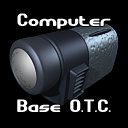
<style>
.page{position:relative;width:128px;height:128px;background:#000000}
.page>*{position:absolute;margin:0}
.t1{font:18px "GravitateBRK";color:#ffffff}
</style>
<div class="page">
<p class="t1" style="left:17px;top:13px;width:94px;height:16px">Computer</p>
<p class="t1" style="left:17px;top:99px;width:94px;height:13px">Base O.T.C.</p>
</div>
